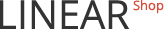
<style>
.page{position:relative;width:166px;height:30px;background:#ffffff}
.page>*{position:absolute;margin:0}
.t1{font:40px "OpenSans";color:#333333}
.t2{font:13px "OpenSans";color:#d94a38}
</style>
<div class="page">
<p class="t1" style="left:0px;top:0px;width:130px;height:29px">LINEAR</p>
<p class="t2" style="left:133px;top:0px;width:31px;height:14px">Shop</p>
</div>
